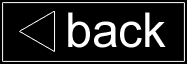
<style>
.page{position:relative;width:187px;height:64px;background:#000000}
.page>*{position:absolute;margin:0}
.t1{font:48px "ArialMT";color:#ffffff}
</style>
<div class="page">
<p class="t1" style="left:68px;top:12px;width:98px;height:36px">back</p>
</div>
